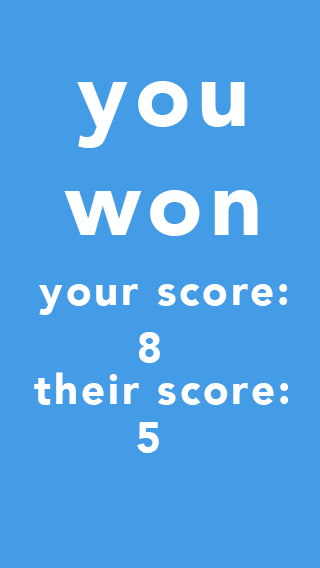
<style>
.page{position:relative;width:320px;height:568px;background:#449ce7}
.page>*{position:absolute;margin:0}
.t1{font:91px "Avenir-Black";letter-spacing:0.075em;color:#feffff}
.t2{font:41.7px "Avenir-Black";letter-spacing:0.075em;color:#feffff}
</style>
<div class="page">
<p class="t1" style="left:64px;top:81px;width:194px;height:155px;text-align:center">you<br>won</p>
<p class="t2" style="left:39px;top:284px;width:249px;height:31px">your score:</p>
<p class="t2" style="left:139px;top:332px;width:21px;height:31px">8</p>
<p class="t2" style="left:34px;top:372px;width:255px;height:33px">their score:</p>
<p class="t2" style="left:137px;top:422px;width:22px;height:31px">5</p>
</div>
